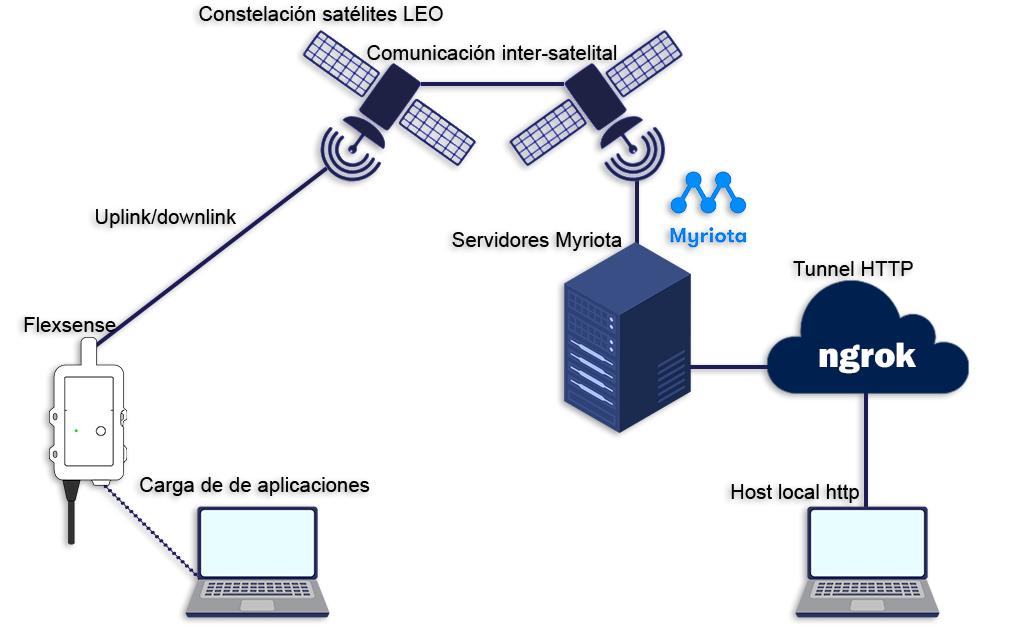
<style>
.page{position:relative;width:1024px;height:640px;background:#ffffff}
.page>*{position:absolute;margin:0}
.t1{font:20.4px "ArialMT";color:#000000}
.t2{font:36.2px "FranklinGothic-Heavy";color:#ffffff}
</style>
<div class="page">
<p class="t1" style="left:199px;top:6px;width:244px;height:15px">Constelación satélites LEO</p>
<p class="t1" style="left:367px;top:45px;width:250px;height:15px">Comunicación inter-satelital</p>
<p class="t1" style="left:96px;top:209px;width:140px;height:19px">Uplink/downlink</p>
<p class="t1" style="left:452px;top:232px;width:170px;height:19px">Servidores Myriota</p>
<p class="t1" style="left:793px;top:261px;width:120px;height:15px">Tunnel HTTP</p>
<p class="t1" style="left:24px;top:317px;width:92px;height:15px">Flexsense</p>
<p class="t2" style="left:819px;top:342px;width:97px;height:32px">ngrok</p>
<p class="t1" style="left:140px;top:477px;width:230px;height:19px">Carga de de aplicaciones</p>
<p class="t1" style="left:731px;top:484px;width:128px;height:19px">Host local http</p>
</div>
